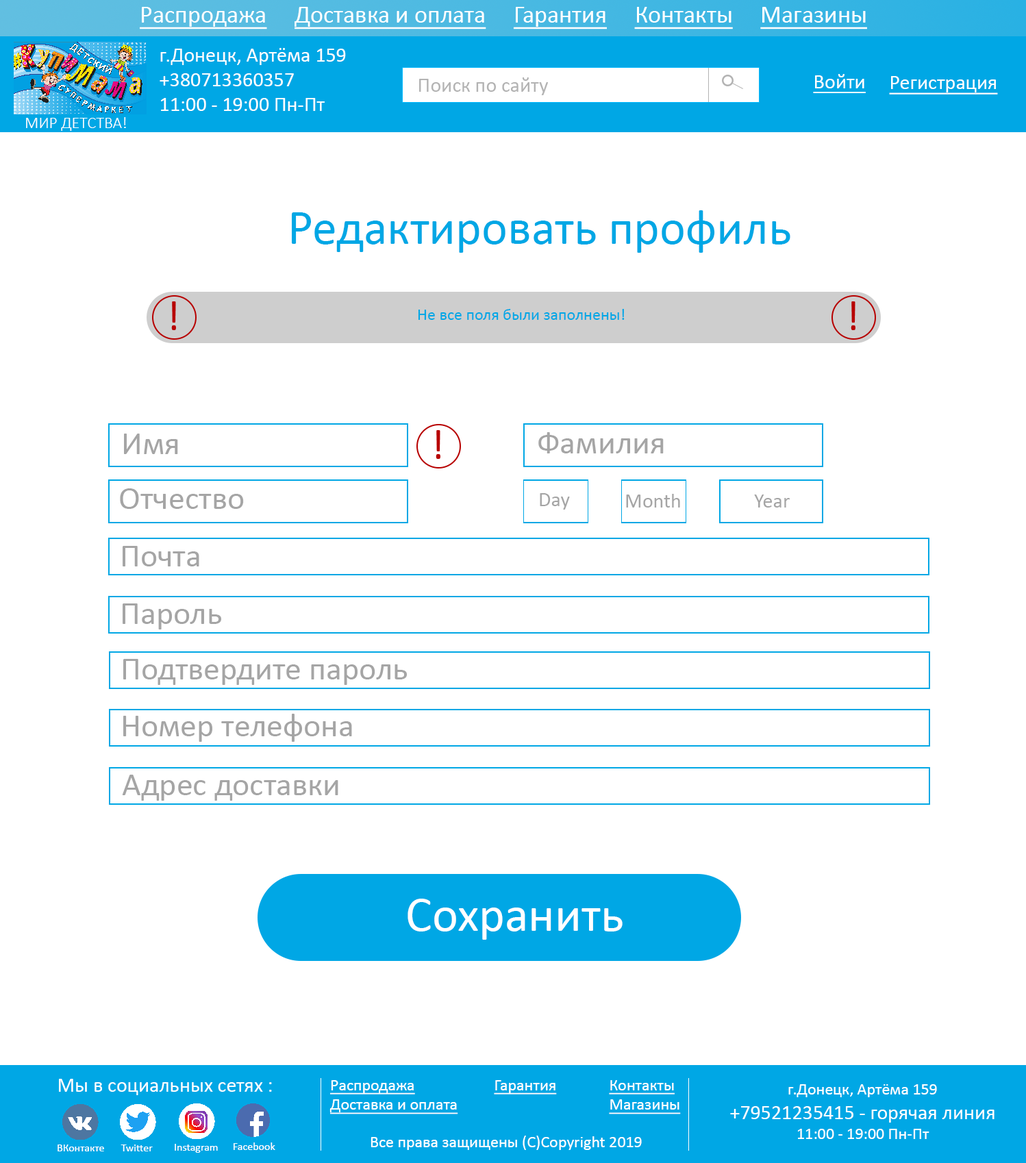
<style>
.page{position:relative;width:1026px;height:1163px;background:#ffffff}
.page>*{position:absolute;margin:0}
.t1{font:24.6px "Calibri";color:#ffffff;text-decoration:underline}
.t2{font:20.5px "Calibri";color:#ffffff}
.t3{font:20.5px "Calibri";color:#b3b3b3}
.t4{font:20.5px "Calibri";color:#ffffff;text-decoration:underline}
.t5{font:16.4px "Calibri-Light";color:#ffffff}
.t6{font:49.3px "Calibri";color:#00a7e5}
.t7{font:16.4px "Calibri";color:#00a7e5}
.t8{font:32.9px "Calibri";color:#a5a5a5}
.t9{font:20.5px "Calibri";color:#a5a5a5}
.t10{font:49.3px "Calibri";color:#ffffff}
.t11{font:16.4px "Calibri";color:#ffffff;text-decoration:underline}
.t12{font:16.4px "Calibri";color:#ffffff}
.t13{font:11px "Calibri";color:#ffffff}
</style>
<div class="page">
<p class="t1" style="left:140px;top:7px;width:727px;height:22px">Распродажа     Доставка и оплата     Гарантия     Контакты     Магазины</p>
<p class="t2" style="left:160px;top:48px;width:186px;height:63px">г.Донецк, Артёма 159<br>+380713360357<br>11:00 - 19:00 Пн-Пт</p>
<p class="t3" style="left:419px;top:77px;width:129px;height:18px">Поиск по сайту</p>
<p class="t4" style="left:813px;top:74px;width:52px;height:19px">Войти</p>
<p class="t4" style="left:889px;top:76px;width:109px;height:18px">Регистрация</p>
<p class="t5" style="left:26px;top:117px;width:100px;height:14px">МИР ДЕТСТВА!</p>
<p class="t6" style="left:292px;top:210px;width:498px;height:43px">Редактировать профиль</p>
<p class="t7" style="left:418px;top:309px;width:206px;height:11px">Не все поля были заполнены!</p>
<p class="t8" style="left:124px;top:433px;width:54px;height:21px">Имя</p>
<p class="t8" style="left:538px;top:432px;width:125px;height:21px">Фамилия</p>
<p class="t8" style="left:120px;top:488px;width:124px;height:21px">Отчество</p>
<p class="t9" style="left:540px;top:493px;width:30px;height:16px">Day</p>
<p class="t9" style="left:626px;top:494px;width:54px;height:13px">Month</p>
<p class="t9" style="left:754px;top:494px;width:35px;height:13px">Year</p>
<p class="t8" style="left:123px;top:546px;width:76px;height:20px">Почта</p>
<p class="t8" style="left:123px;top:603px;width:98px;height:26px">Пароль</p>
<p class="t8" style="left:123px;top:659px;width:284px;height:26px">Подтвердите пароль</p>
<p class="t8" style="left:123px;top:713px;width:229px;height:29px">Номер телефона</p>
<p class="t8" style="left:122px;top:774px;width:216px;height:26px">Адрес доставки</p>
<p class="t10" style="left:407px;top:898px;width:215px;height:41px">Сохранить</p>
<p class="t2" style="left:59px;top:1078px;width:213px;height:17px">Мы в социальных сетях :</p>
<p class="t11" style="left:329px;top:1080px;width:129px;height:34px">Распродажа<br>Доставка и оплата</p>
<p class="t11" style="left:494px;top:1080px;width:63px;height:14px">Гарантия</p>
<p class="t11" style="left:609px;top:1080px;width:72px;height:34px">Контакты<br>Магазины</p>
<p class="t2" style="left:730px;top:1084px;width:264px;height:55px;text-align:center"><span class="t12">г.Донецк, Артёма 159<br></span>+79521235415 - горячая линия<br><span class="t12">11:00 - 19:00 Пн-Пт</span></p>
<p class="t13" style="left:58px;top:1144px;width:46px;height:7px">ВКонтакте</p>
<p class="t13" style="left:121px;top:1144px;width:32px;height:7px">Twitter</p>
<p class="t13" style="left:175px;top:1143px;width:43px;height:9px">Instagram</p>
<p class="t13" style="left:233px;top:1142px;width:42px;height:8px">Facebook</p>
<p class="t12" style="left:370px;top:1135px;width:272px;height:15px">Все права защищены (С)Copyright 2019</p>
</div>
